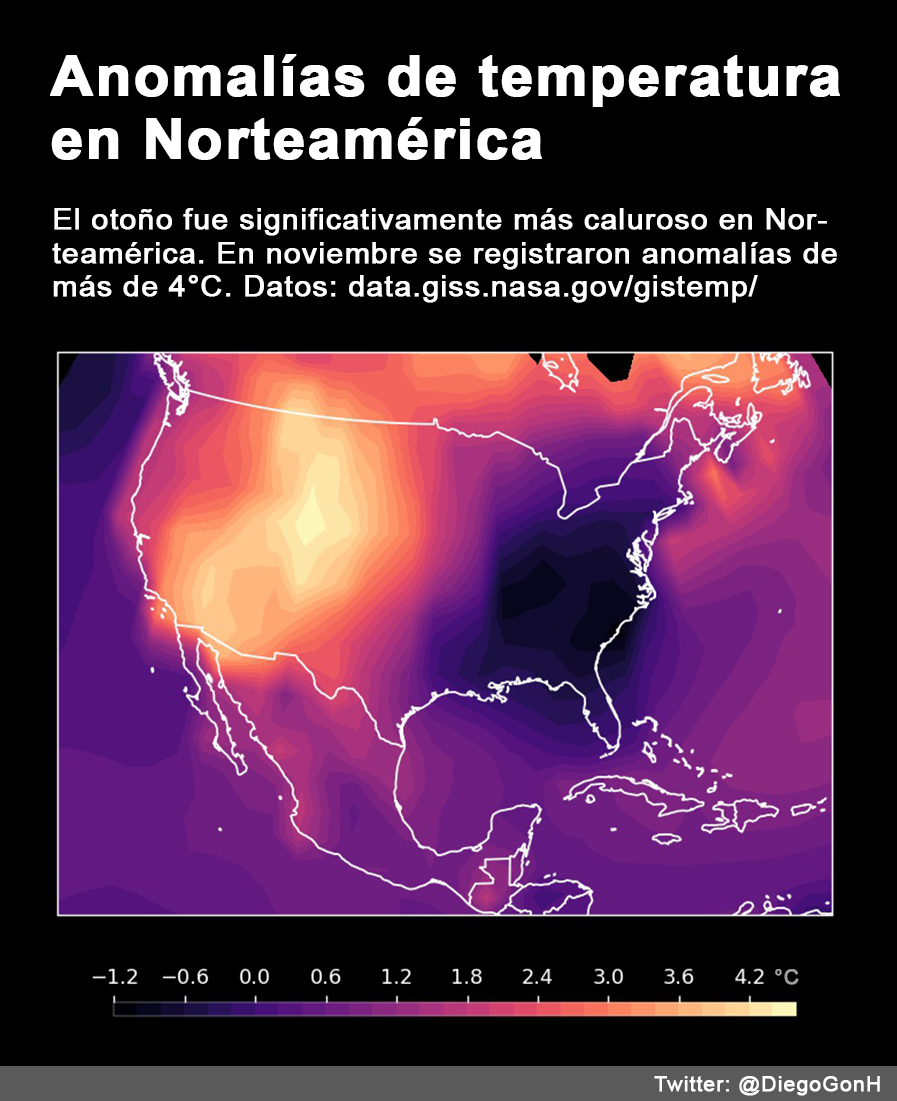
<style>
.page{position:relative;width:897px;height:1101px;background:#000000}
.page>*{position:absolute;margin:0}
.t1{font:56.2px/62.5px "Arial-BoldMT";letter-spacing:0.02em;color:#ffffff;font-weight:bold;scale:1.03 1}
.t2{font:29.2px/33.3px "ArialMT";letter-spacing:0.02em;color:#ffffff;font-weight:bold;scale:1.03 1}
.t3{font:20.8px "ArialMT";letter-spacing:0.02em;color:#9e9e9e;font-weight:bold;scale:1.03 1}
.t4{font:20.8px "ArialMT";letter-spacing:0.02em;color:#ffffff;font-weight:bold;scale:1.03 1}
</style>
<div class="page">
<p class="t1" style="left:50px;top:54px;width:790px;height:106px">Anomalías de temperatura en Norteamérica</p>
<p class="t2" style="left:52px;top:208px;width:785px;height:95px">El otoño fue significativamente más caluroso en Nor- teamérica. En noviembre se registraron anomalías de más de 4°C. Datos: data.giss.nasa.gov/gistemp/</p>
<p class="t3" style="left:775px;top:969px;width:24px;height:16px">°C</p>
<p class="t4" style="left:654px;top:1076px;width:226px;height:20px">Twitter: @DiegoGonH</p>
</div>
